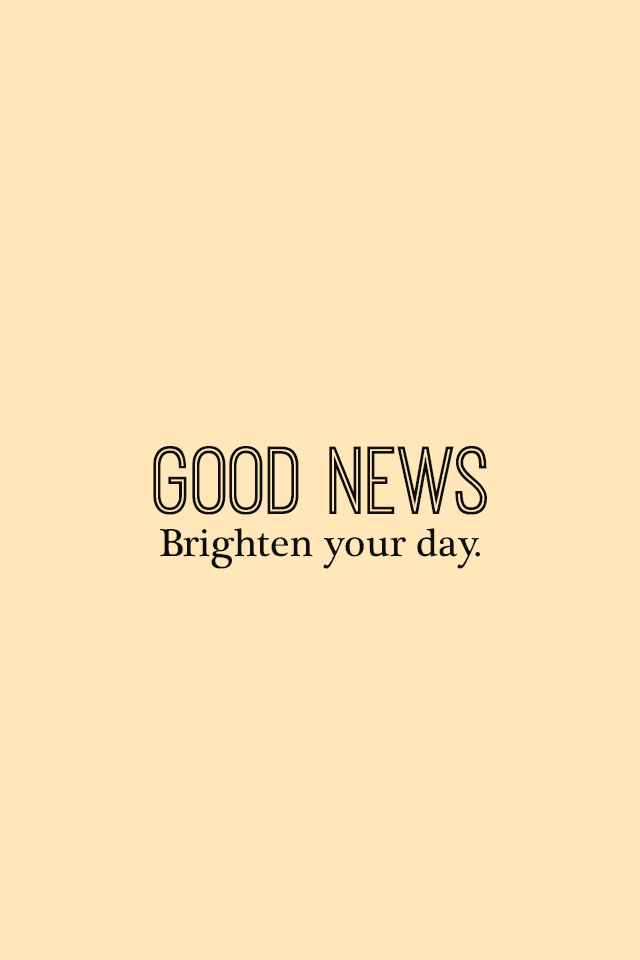
<style>
.page{position:relative;width:640px;height:960px;background:#ffe7ba}
.page>*{position:absolute;margin:0}
.t1{font:100px "OstrichSansInline";color:#0e0e0e}
.t2{font:40px "PlantagenetCherokee";color:#0e0e0e}
</style>
<div class="page">
<p class="t1" style="left:153px;top:446px;width:334px;height:69px">GOOD NEWS</p>
<p class="t2" style="left:160px;top:528px;width:320px;height:41px">Brighten your day.</p>
</div>
